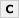
<style>
.page{position:relative;width:19px;height:18px;background:#f0f0f0}
.page>*{position:absolute;margin:0}
.t1{font:11px "Verdana-Bold";color:#000000}
</style>
<div class="page">
<p class="t1" style="left:6px;top:4px;width:7px;height:10px">C</p>
</div>
